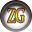
<style>
.page{position:relative;width:32px;height:32px}
.page>*{position:absolute;margin:0}
.t1{font:13px "RingbearerMedium"}
</style>
<div class="page">
<p class="t1" style="left:7px;top:8px;width:17px;height:15px">ZG</p>
</div>
